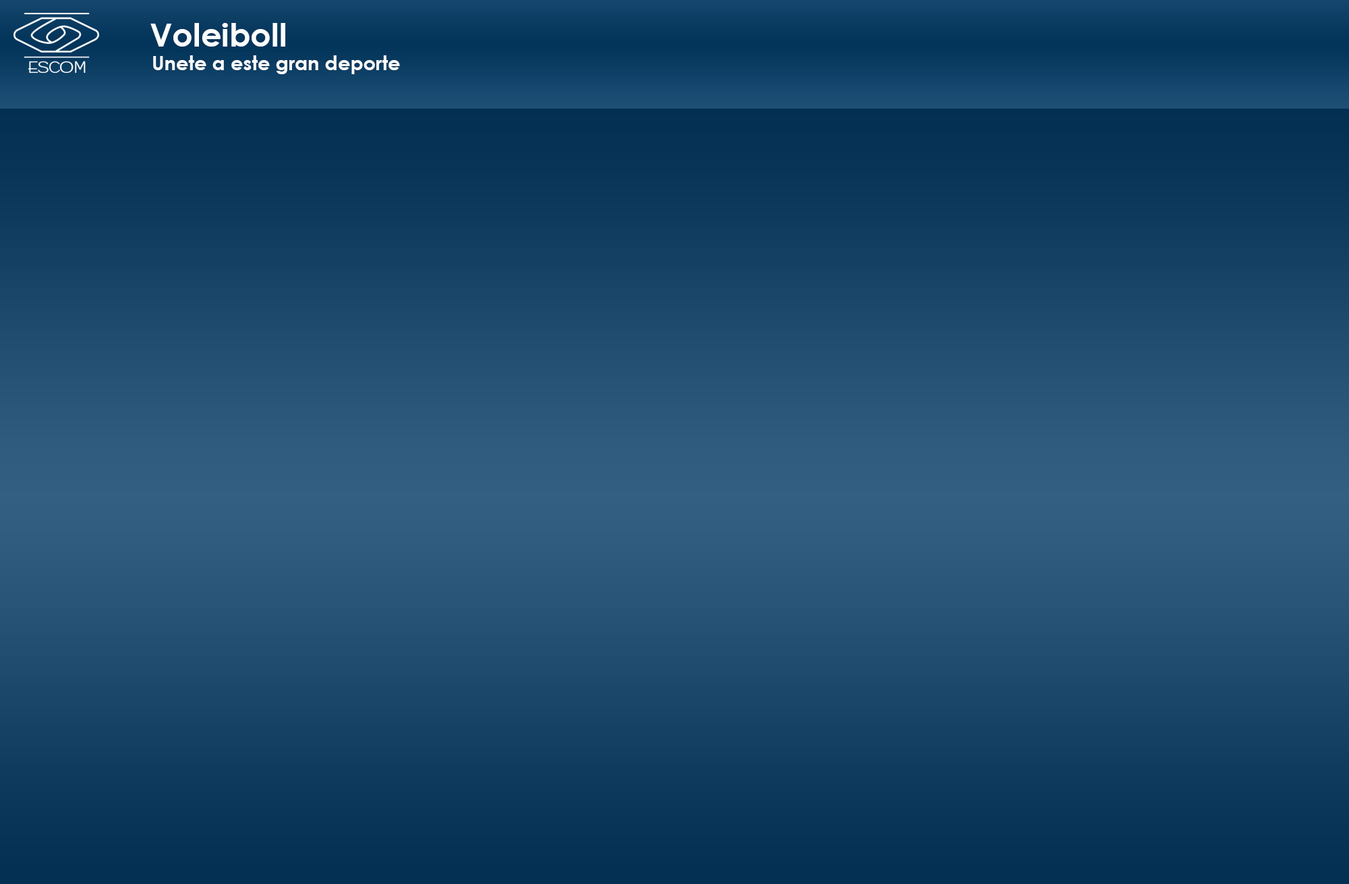
<style>
.page{position:relative;width:1349px;height:884px}
.page>*{position:absolute;margin:0}
.t1{font:19.6px "CenturyGothic-Bold";color:#fdfdfd}
.t2{font:32.4px "CenturyGothic-Bold";color:#fdfdfd}
</style>
<div class="page">
<p class="t1" style="left:150px;top:23px;width:250px;height:51px"><span class="t2">    Voleiboll<br></span>       Unete a este gran deporte</p>
</div>
